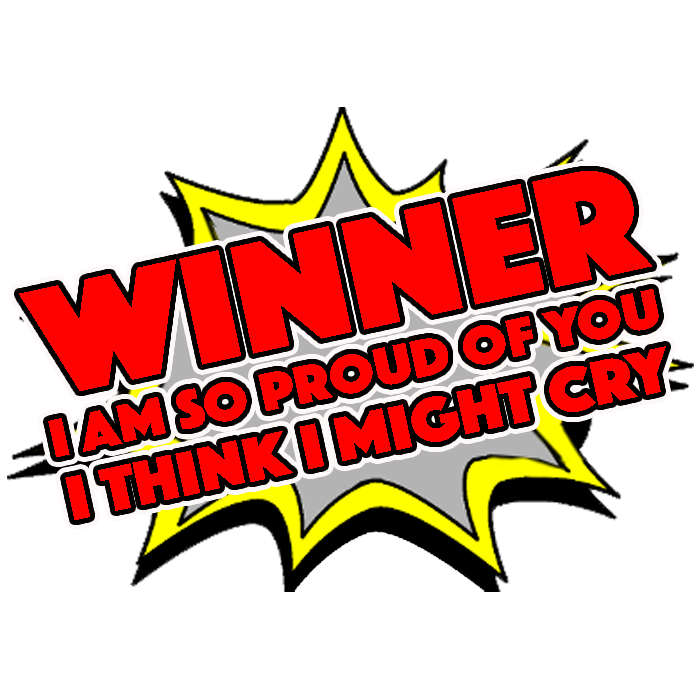
<style>
.page{position:relative;width:700px;height:700px;background:#ffffff}
.page>*{position:absolute;margin:0}
.t1{font:162.4px "Phosphate-Solid";color:#ff0101;text-transform:uppercase;scale:1.1 1}
.t2{font:65.2px "Phosphate-Solid";color:#ff0101;text-transform:uppercase;scale:1.1 1}
</style>
<div class="page">
<p class="t1" style="left:19px;top:171px;width:633px;height:220px;rotate:-12deg">WINNER</p>
<p class="t2" style="left:65px;top:346px;width:601px;height:174px;rotate:-12deg">I THINK I MIGHT CRY</p>
</div>
